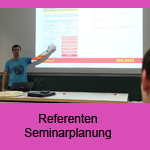
<style>
.page{position:relative;width:150px;height:150px;background:#d84db6}
.page>*{position:absolute;margin:0}
.t1{font:12px "ArialMT";color:#040003}
</style>
<div class="page">
<p class="t1" style="left:24px;top:114px;width:87px;height:25px;text-align:center">Referenten<br>Seminarplanung</p>
</div>
